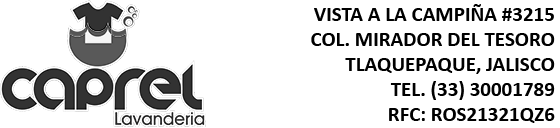
<style>
.page{position:relative;width:560px;height:128px;background:#ffffff}
.page>*{position:absolute;margin:0}
.t1{font:21px "Calibri-Bold";color:#000000}
</style>
<div class="page">
<p class="t1" style="left:311px;top:4px;width:244px;height:119px;text-align:right">VISTA A LA CAMPIÑA #3215<br>COL. MIRADOR DEL TESORO<br>TLAQUEPAQUE, JALISCO<br>TEL. (33) 30001789<br>RFC: ROS21321QZ6</p>
</div>
